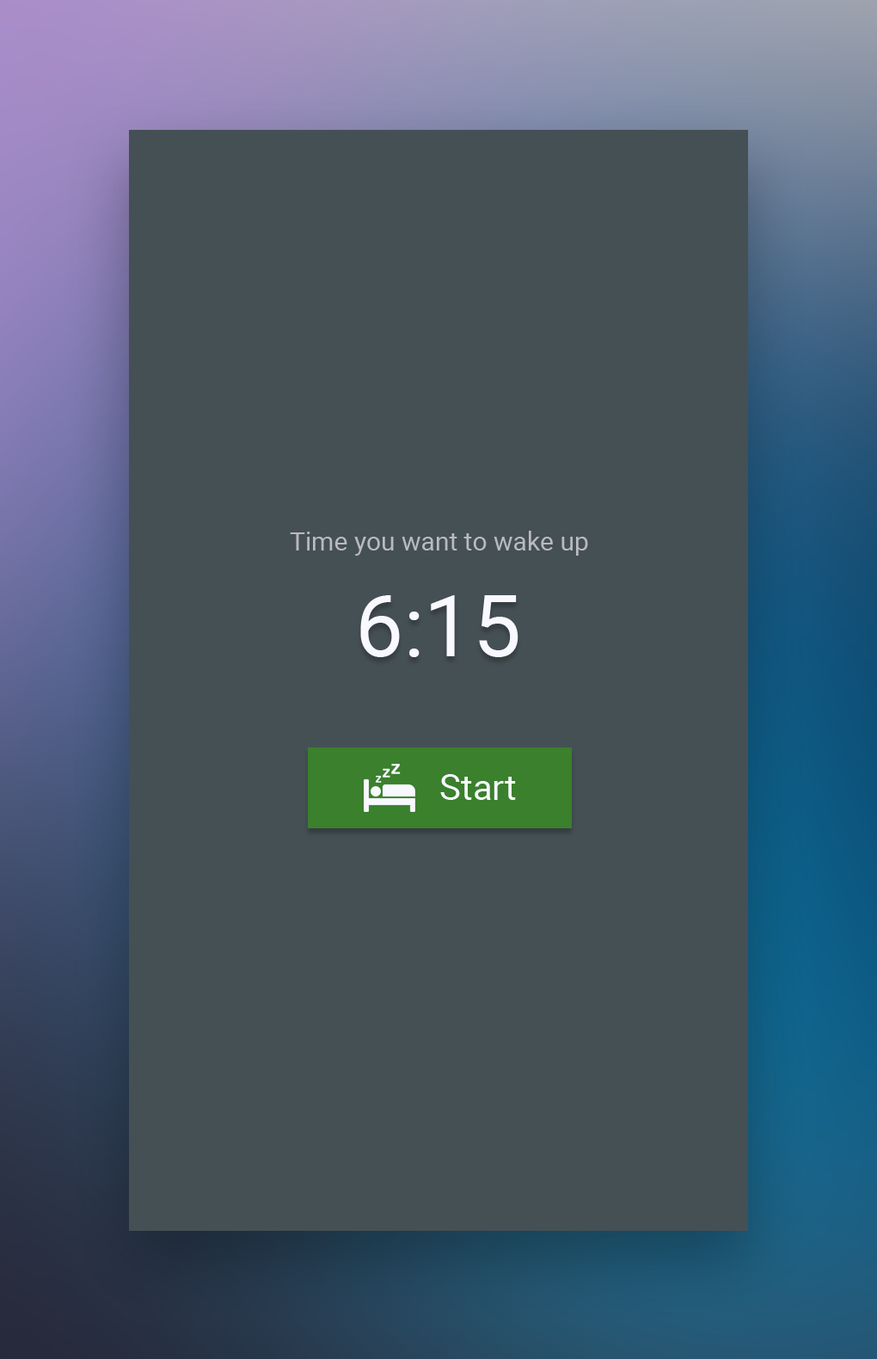
<style>
.page{position:relative;width:877px;height:1359px;background:#455055}
.page>*{position:absolute;margin:0}
.t1{font:25.8px "Roboto-Regular";color:#bababf}
.t2{font:86px "Roboto-Regular";color:#f8f8ff}
.t3{font:36.1px "Roboto-Regular";color:#f8f8ff}
</style>
<div class="page">
<p class="t1" style="left:290px;top:531px;width:298px;height:25px">Time you want to wake up</p>
<p class="t2" style="left:360px;top:595px;width:159px;height:62px">6:15</p>
<p class="t3" style="left:440px;top:774px;width:76px;height:26px">Start</p>
</div>
